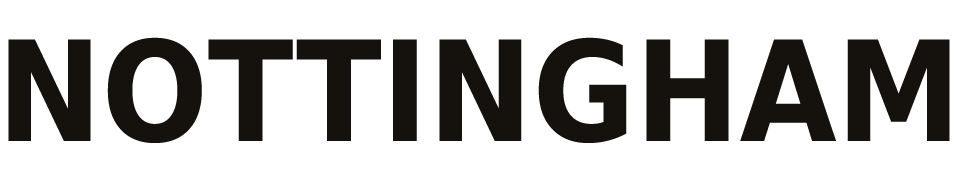
<style>
.page{position:relative;width:961px;height:180px;background:#ffffff}
.page>*{position:absolute;margin:0}
.t1{font:138.9px "DejaVuSansCondensed-Bold";color:#15120d}
</style>
<div class="page">
<p class="t1" style="left:8px;top:37px;width:942px;height:106px">NOTTINGHAM</p>
</div>
